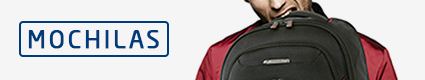
<style>
.page{position:relative;width:425px;height:80px;background:#f5f5f5}
.page>*{position:absolute;margin:0}
.t1{font:24px "NeoSansPro-Regular";letter-spacing:0.1em;color:#003b7c;font-weight:bold}
</style>
<div class="page">
<p class="t1" style="left:28px;top:30px;width:131px;height:19px">MOCHILAS</p>
</div>
